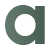
<style>
.page{position:relative;width:50px;height:50px;background:#ffffff}
.page>*{position:absolute;margin:0}
.t1{font:72px "CenturyGothic-Bold";letter-spacing:0.025em;color:#52695c}
</style>
<div class="page">
<p class="t1" style="left:5px;top:5px;width:40px;height:40px">a</p>
</div>
